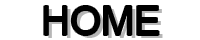
<style>
.page{position:relative;width:200px;height:40px;background:#ffffff}
.page>*{position:absolute;margin:0}
.t1{font:40px "ArialMT";color:#000000}
</style>
<div class="page">
<p class="t1" style="left:44px;top:6px;width:115px;height:29px">HOME</p>
</div>
